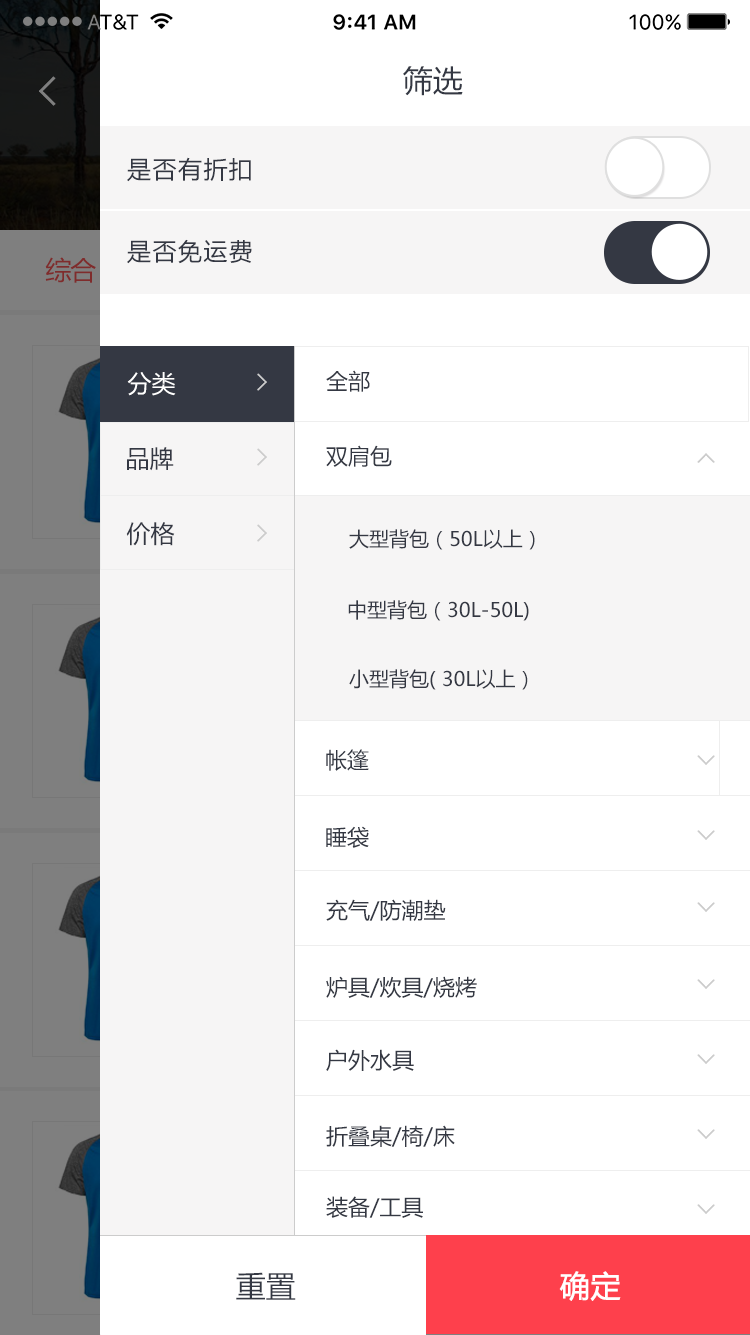
<style>
.page{position:relative;width:750px;height:1335px;background:#ffffff}
.page>*{position:absolute;margin:0}
.t1{font:30px "MicrosoftYaHei";color:#343843}
.t2{font:24px "MicrosoftYaHei";letter-spacing:0.06em;color:#343843}
.t3{font:24px "MicrosoftYaHei";color:#ffffff}
.t4{font:22px "MicrosoftYaHei";color:#343843}
.t5{font:24px "MicrosoftYaHei";color:#343843}
.t6{font:20px "MicrosoftYaHei";color:#343843}
.t7{font:30px "MicrosoftYaHei";color:#ffffff;font-weight:bold}
</style>
<div class="page">
<p class="t1" style="left:403px;top:66px;width:60px;height:30px">筛选</p>
<p class="t2" style="left:127px;top:157px;width:124px;height:25px">是否有折扣</p>
<p class="t2" style="left:127px;top:239px;width:125px;height:25px">是否免运费</p>
<p class="t3" style="left:127px;top:372px;width:49px;height:24px">分类</p>
<p class="t4" style="left:326px;top:370px;width:44px;height:22px">全部</p>
<p class="t5" style="left:127px;top:447px;width:47px;height:24px">品牌</p>
<p class="t4" style="left:326px;top:445px;width:66px;height:22px">双肩包</p>
<p class="t5" style="left:126px;top:522px;width:49px;height:24px">价格</p>
<p class="t6" style="left:349px;top:529px;width:186px;height:21px">大型背包（50L以上）</p>
<p class="t6" style="left:348px;top:600px;width:181px;height:21px">中型背包（30L-50L)</p>
<p class="t6" style="left:349px;top:669px;width:179px;height:21px">小型背包( 30L以上）</p>
<p class="t4" style="left:326px;top:749px;width:43px;height:22px">帐篷</p>
<p class="t4" style="left:326px;top:826px;width:43px;height:22px">睡袋</p>
<p class="t4" style="left:326px;top:899px;width:120px;height:22px">充气/防潮垫</p>
<p class="t4" style="left:326px;top:976px;width:151px;height:22px">炉具/炊具/烧烤</p>
<p class="t4" style="left:326px;top:1049px;width:88px;height:22px">户外水具</p>
<p class="t4" style="left:326px;top:1125px;width:129px;height:22px">折叠桌/椅/床</p>
<p class="t4" style="left:326px;top:1196px;width:97px;height:22px">装备/工具</p>
<p class="t1" style="left:236px;top:1272px;width:60px;height:28px">重置</p>
<p class="t7" style="left:559px;top:1271px;width:62px;height:30px">确定</p>
</div>
